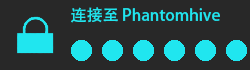
<style>
.page{position:relative;width:250px;height:70px;background:#282828}
.page>*{position:absolute;margin:0}
.t1{font:16px "AdobeHeitiStd-Regular";color:#20e5ee}
</style>
<div class="page">
<p class="t1" style="left:71px;top:7px;width:149px;height:16px">连接至 Phantomhive</p>
</div>
